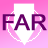
<style>
.page{position:relative;width:48px;height:48px;background:#ffffff}
.page>*{position:absolute;margin:0}
.t1{font:22px "ArialMT";color:#660066;font-weight:bold;scale:1.03 1}
</style>
<div class="page">
<p class="t1" style="left:2px;top:14px;width:45px;height:17px">FAR</p>
</div>
